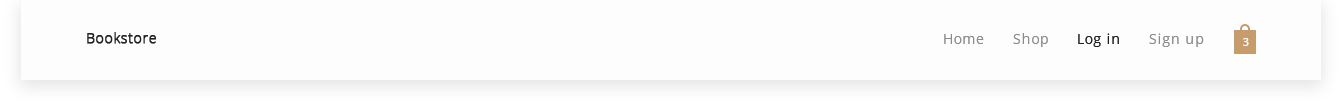
<style>
.page{position:relative;width:1343px;height:107px;background:#fdfdfd}
.page>*{position:absolute;margin:0}
.t1{font:14px "OpenSans-Light";letter-spacing:0.05em;color:#212121;font-weight:bold}
.t2{font:14px "OpenSans";letter-spacing:0.05em;color:#8c8c8c}
.t3{font:14px "OpenSans";letter-spacing:0.05em;color:#1e1e1c}
.t4{font:11px "OpenSans-Semibold";letter-spacing:0.05em;color:#fefdfd}
</style>
<div class="page">
<p class="t1" style="left:87px;top:32px;width:69px;height:12px">Bookstore</p>
<p class="t2" style="left:944px;top:34px;width:40px;height:10px">Home</p>
<p class="t2" style="left:1013px;top:33px;width:35px;height:14px">Shop</p>
<p class="t3" style="left:1078px;top:33px;width:41px;height:14px">Log in</p>
<p class="t2" style="left:1149px;top:33px;width:55px;height:14px">Sign up</p>
<p class="t4" style="left:1243px;top:38px;width:6px;height:8px">3</p>
</div>
